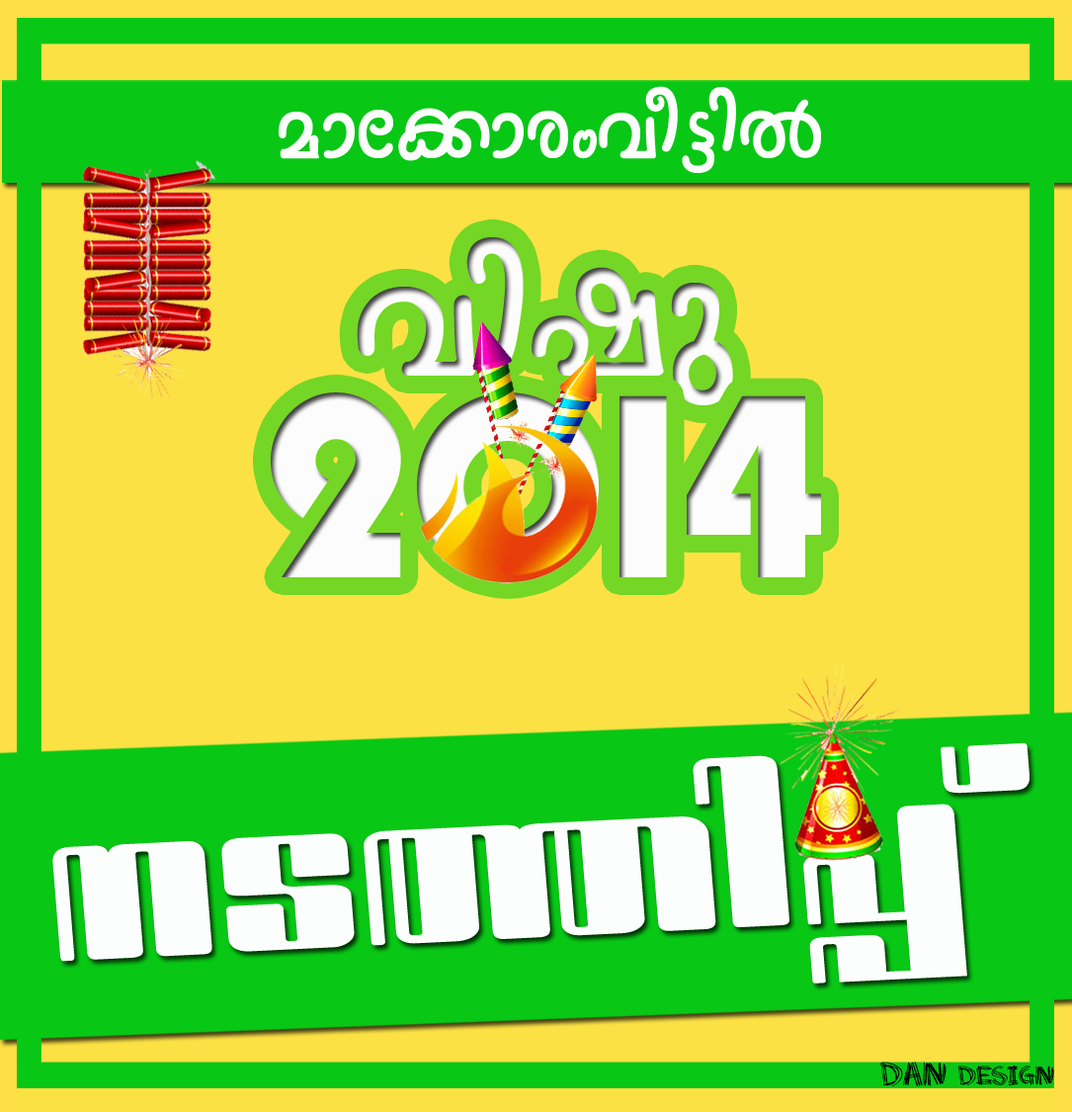
<style>
.page{position:relative;width:1072px;height:1112px;background:#fce145}
.page>*{position:absolute;margin:0}
.t1{font:108.3px "FML-Nanditha";color:#fdfdfd;scale:0.9 1}
.t2{font:211.3px "FML-Nanditha";color:#fcfcfc;scale:0.97 1}
.t3{font:271.6px "PumpDemiBoldLetPlain";color:#fcfcfc;scale:0.97 1}
.t4{font:240.4px "FML-TTSugatha-Bold";letter-spacing:0.01em;color:#fcfefd;scale:1.48 1}
.t5{font:19.2px "Scratchmyback";color:#000000}
.t6{font:24px "Scratchmyback";color:#000000}
</style>
<div class="page">
<p class="t1" style="left:279px;top:86px;width:542px;height:87px">amt¡mcwho«nÂ</p>
<p class="t2" style="left:357px;top:237px;width:376px;height:168px">hnjp</p>
<p class="t3" style="left:271px;top:392px;width:550px;height:189px">2014</p>
<p class="t4" style="left:52px;top:743px;width:978px;height:240px;rotate:-3deg">\S¯n¸v</p>
<p class="t5" style="left:881px;top:1062px;width:174px;height:24px"><span class="t6">Dan </span>Design</p>
</div>
